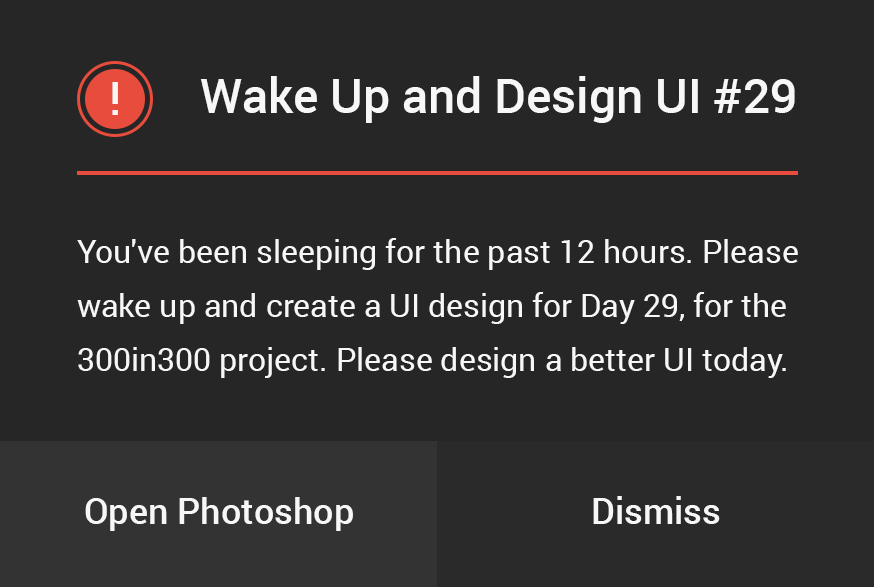
<style>
.page{position:relative;width:874px;height:587px;background:#262626}
.page>*{position:absolute;margin:0}
.t1{font:48px "Roboto-Medium";color:#f7f7f7}
.t2{font:45.9px "Roboto-Medium";color:#f7f7f7}
.t3{font:32px/54px "Roboto-Regular";color:#f7f7f7}
.t4{font:36px "Roboto-Medium";color:#f7f7f7}
</style>
<div class="page">
<p class="t1" style="left:200px;top:76px;width:595px;height:47px">Wake Up and Design UI #29</p>
<p class="t2" style="left:112px;top:82px;width:6px;height:33px">!</p>
<p class="t3" style="left:77px;top:238px;width:721px;height:140px">You've been sleeping for the past 12 hours. Please<br>wake up and create a UI design for Day 29, for the<br>300in300 project. Please design a better UI today.</p>
<p class="t4" style="left:85px;top:497px;width:268px;height:34px">Open Photoshop</p>
<p class="t4" style="left:593px;top:496px;width:127px;height:28px">Dismiss</p>
</div>
